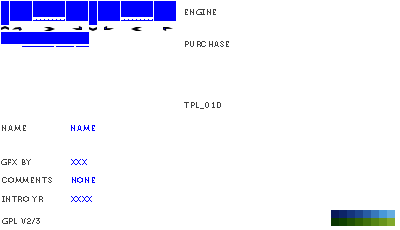
<style>
.page{position:relative;width:400px;height:230px;background:#ffffff}
.page>*{position:absolute;margin:0}
.t1{font:8px "Museo700-Regular";letter-spacing:0.075em;color:#404040;text-transform:uppercase}
.t2{font:8px "Museo700-Regular";letter-spacing:0.075em;color:#0000ff;text-transform:uppercase}
</style>
<div class="page">
<p class="t1" style="left:185px;top:9px;width:31px;height:6px">engine</p>
<p class="t1" style="left:185px;top:41px;width:44px;height:6px">purchase</p>
<p class="t1" style="left:184px;top:102px;width:37px;height:7px">tpl_01d</p>
<p class="t1" style="left:2px;top:125px;width:24px;height:6px">name</p>
<p class="t2" style="left:71px;top:125px;width:24px;height:6px">name</p>
<p class="t1" style="left:1px;top:159px;width:30px;height:6px">gfx by</p>
<p class="t2" style="left:71px;top:159px;width:16px;height:6px">xxx</p>
<p class="t1" style="left:2px;top:177px;width:50px;height:6px">comments</p>
<p class="t2" style="left:72px;top:177px;width:23px;height:6px">none</p>
<p class="t1" style="left:2px;top:196px;width:41px;height:6px">intro yr</p>
<p class="t2" style="left:71px;top:196px;width:21px;height:6px">xxxx</p>
<p class="t1" style="left:2px;top:218px;width:38px;height:6px">gpl v2/3</p>
</div>
